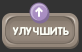
<style>
.page{position:relative;width:82px;height:52px;background:#333333}
.page>*{position:absolute;margin:0}
.t1{font:10px "RotondaC-Bold";letter-spacing:0.06em;color:#fbfdf5;text-transform:uppercase}
</style>
<div class="page">
<p class="t1" style="left:12px;top:27px;width:57px;height:8px">улучшить</p>
</div>
